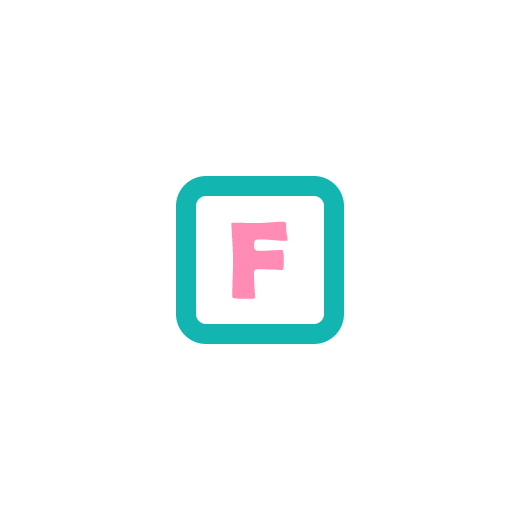
<style>
.page{position:relative;width:520px;height:520px;background:#ffffff}
.page>*{position:absolute;margin:0}
.t1{font:110px "BerlinSansFBDemi-Bold";letter-spacing:0.2em;color:#ff8cb5}
</style>
<div class="page">
<p class="t1" style="left:231px;top:221px;width:57px;height:78px">F</p>
</div>
